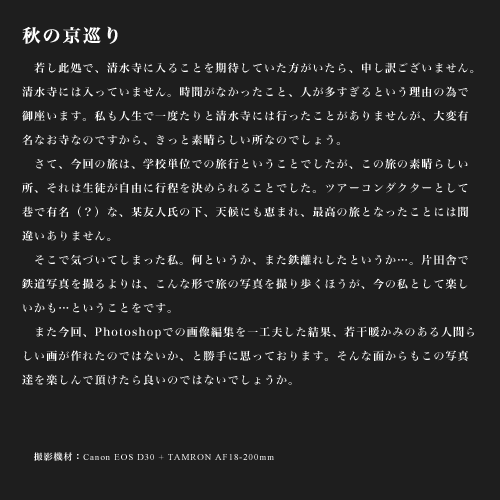
<style>
.page{position:relative;width:500px;height:500px;background:#1e1e1e}
.page>*{position:absolute;margin:0}
.t1{font:11px/24px "HiraMinPro-W6";letter-spacing:0.1em;color:#ffffff}
.t2{font:18px/24px "HiraMinPro-W6";letter-spacing:0.1em;color:#ffffff;font-weight:bold}
.t3{font:9px/18px "HiraMinPro-W6";letter-spacing:0.1em;color:#ffffff}
.t4{font:9px/18px "TimesNewRomanPSMT";letter-spacing:0.1em;color:#ffffff}
</style>
<div class="page">
<p class="t1" style="left:22px;top:26px;width:452px;height:435px"><span class="t2">秋の京巡り<br>　<br></span>　若し此処で、清水寺に入ることを期待していた方がいたら、申し訳ございません。<br>清水寺には入っていません。時間がなかったこと、人が多すぎるという理由の為で<br>御座います。私も人生で一度たりと清水寺には行ったことがありませんが、大変有<br>名なお寺なのですから、きっと素晴らしい所なのでしょう。<br>　さて、今回の旅は、学校単位での旅行ということでしたが、この旅の素晴らしい<br>所、それは生徒が自由に行程を決められることでした。ツアーコンダクターとして<br>巷で有名（？）な、某友人氏の下、天候にも恵まれ、最高の旅となったことには間<br>違いありません。<br>　そこで気づいてしまった私。何というか、また鉄離れしたというか…。片田舎で<br>鉄道写真を撮るよりは、こんな形で旅の写真を撮り歩くほうが、今の私として楽し<br>いかも…ということをです。<br>　また今回、Photoshopでの画像編集を一工夫した結果、若干暖かみのある人間ら<br>しい画が作れたのではないか、と勝手に思っております。そんな面からもこの写真<br>達を楽しんで頂けたら良いのではないでしょうか。<br><br><br><span class="t3">   撮影機材：</span><span class="t4">Canon EOS D30 + TAMRON AF18-200mm</span></p>
</div>
